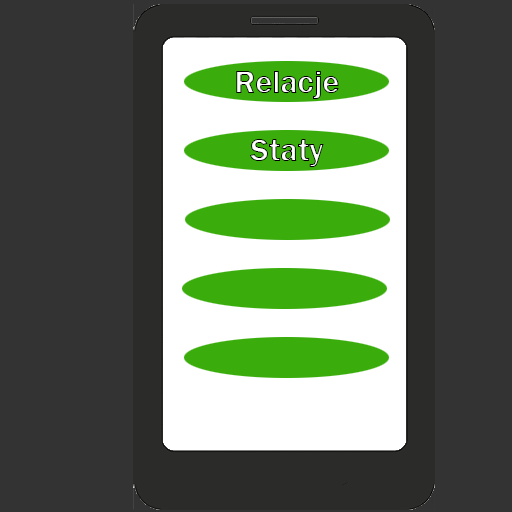
<style>
.page{position:relative;width:512px;height:512px;background:#333333}
.page>*{position:absolute;margin:0}
.t1{font:33.3px "FranklinGothic-Demi";letter-spacing:-0.02em}
</style>
<div class="page">
<p class="t1" style="left:236px;top:71px;width:103px;height:28px">Relacje</p>
<p class="t1" style="left:250px;top:139px;width:74px;height:28px">Staty</p>
</div>
